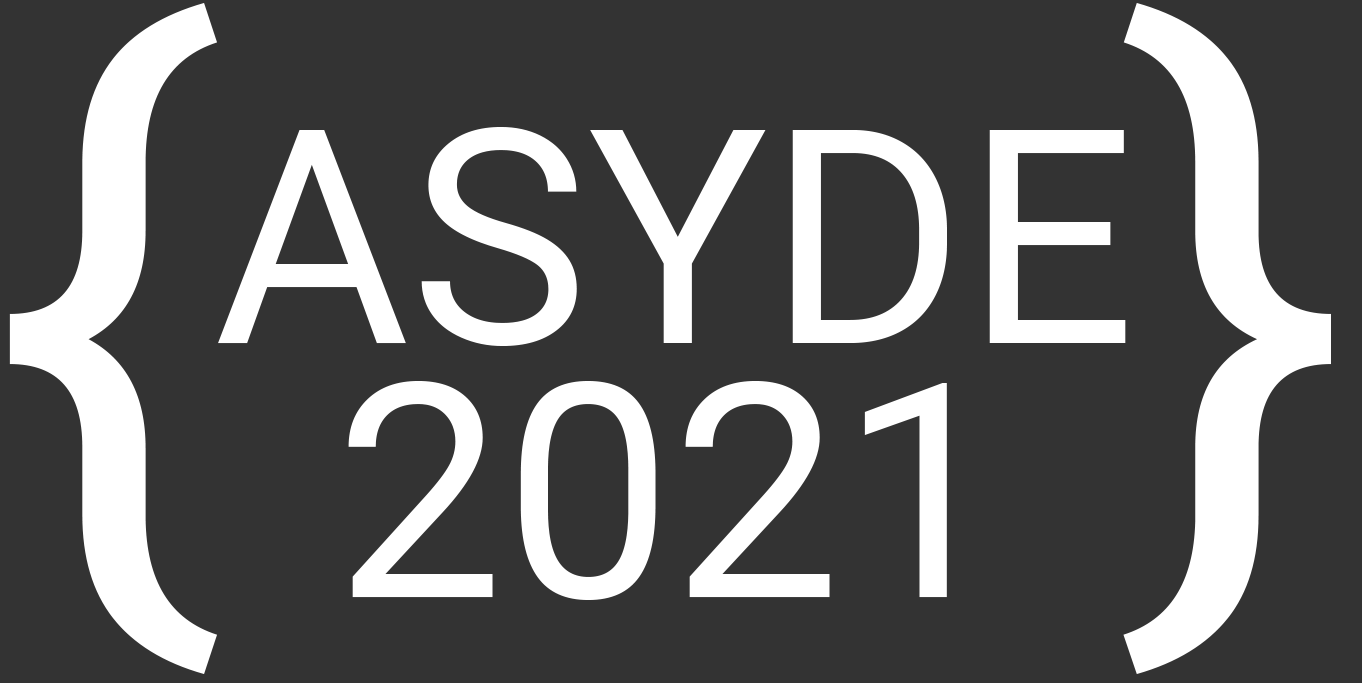
<style>
.page{position:relative;width:1362px;height:683px;background:#333333}
.page>*{position:absolute;margin:0}
.t1{font:700px "Roboto-Regular";color:#ffffff}
.t2{font:300px "Roboto-Regular";color:#ffffff}
</style>
<div class="page">
<p class="t1" style="left:9px;top:3px;width:208px;height:671px">{</p>
<p class="t1" style="left:1123px;top:3px;width:208px;height:671px">}</p>
<p class="t2" style="left:218px;top:127px;width:908px;height:219px">ASYDE</p>
<p class="t2" style="left:348px;top:381px;width:599px;height:219px">2021</p>
</div>
